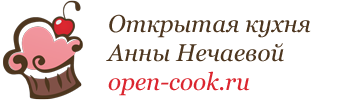
<style>
.page{position:relative;width:350px;height:100px;background:#ffffff}
.page>*{position:absolute;margin:0}
.t1{font:24px "Georgia-Italic";color:#4d361f}
.t2{font:24px "Georgia-Italic";color:#db262f}
</style>
<div class="page">
<p class="t1" style="left:106px;top:14px;width:205px;height:82px">Открытая кухня<br>Анны Нечаевой<br><span class="t2">open-cook.ru</span></p>
</div>
